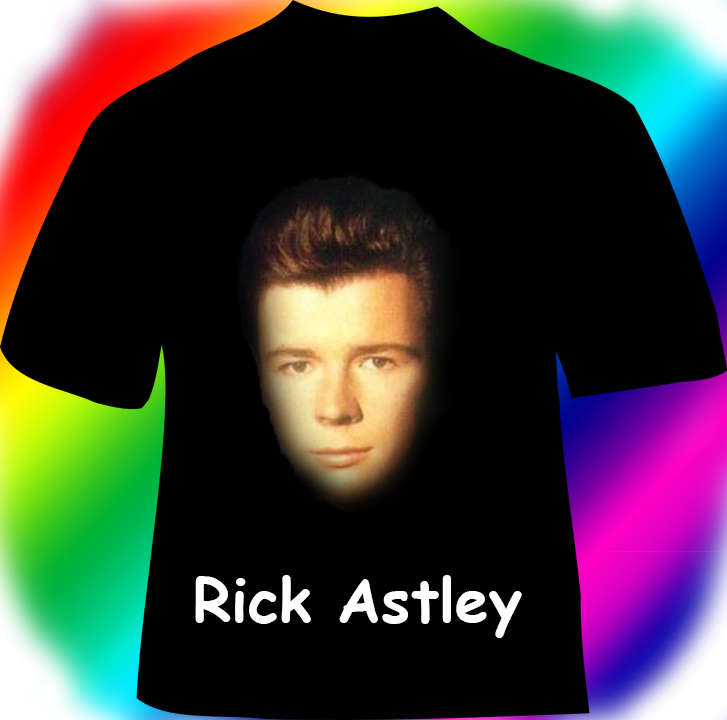
<style>
.page{position:relative;width:727px;height:720px;background:#000000}
.page>*{position:absolute;margin:0}
.t1{font:60px "ComicSansMS-Bold";color:#ffffff}
</style>
<div class="page">
<p class="t1" style="left:195px;top:575px;width:327px;height:63px">Rick Astley</p>
</div>
